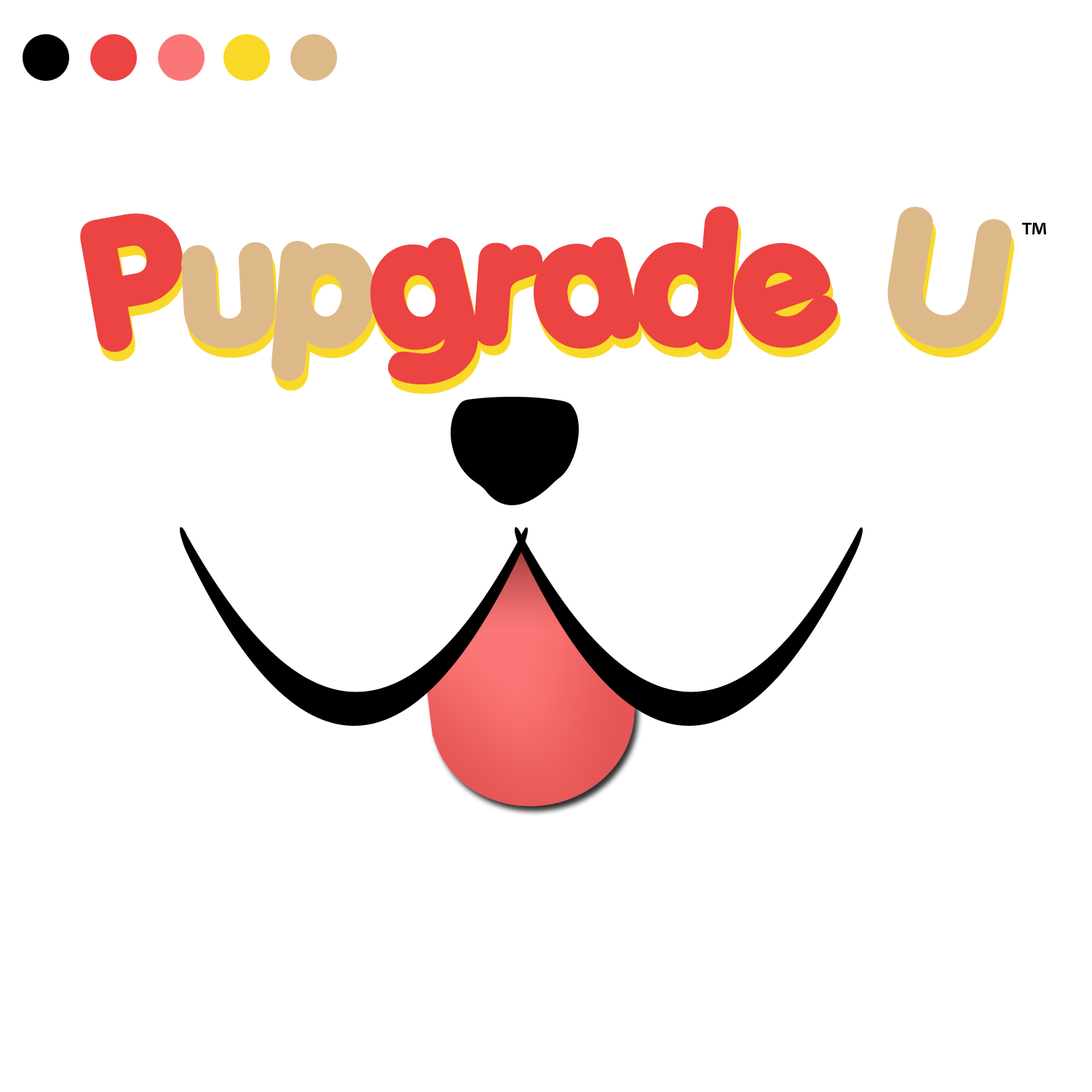
<style>
.page{position:relative;width:1092px;height:1092px;background:#ffffff}
.page>*{position:absolute;margin:0}
.t1{font:174px "Porkys";color:#ec4343}
.t2{font:174px "Porkys";color:#ddb989}
.t3{font:174px "Porkys"}
</style>
<div class="page">
<p class="t1" style="left:80px;top:206px;width:932px;height:178px">P<span class="t2">up</span>grade <span class="t2">U</span></p>
<p class="t3" style="left:83px;top:215px;width:932px;height:179px">Pupgrade U</p>
</div>
